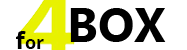
<style>
.page{position:relative;width:187px;height:50px;background:#ffffff}
.page>*{position:absolute;margin:0}
.t1{font:48px "MyanmarText-Bold";color:#000000}
.t2{font:18px "OpenSans-Bold";color:#000000}
.t3{font:24px "OpenSans-Bold";color:#000000}
</style>
<div class="page">
<p class="t1" style="left:70px;top:8px;width:96px;height:34px">BOX</p>
<p class="t2" style="left:16px;top:31px;width:28px;height:18px"><span class="t3">f</span>or</p>
</div>
